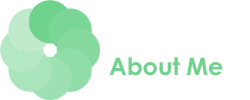
<style>
.page{position:relative;width:250px;height:100px;background:#ffffff}
.page>*{position:absolute;margin:0}
.t1{font:24px "CenturyGothic-Bold";color:#6fd28d}
</style>
<div class="page">
<p class="t1" style="left:109px;top:57px;width:114px;height:19px">About Me</p>
</div>
